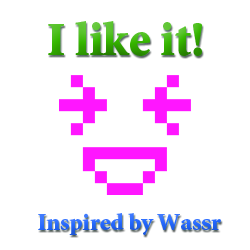
<style>
.page{position:relative;width:250px;height:250px;background:#ffffff}
.page>*{position:absolute;margin:0}
.t1{font:48px "MinionStd-Black"}
.t2{font:24px "MinionStd-Black";color:#2367ff}
</style>
<div class="page">
<p class="t1" style="left:48px;top:21px;width:154px;height:35px">I like it!</p>
<p class="t2" style="left:38px;top:213px;width:183px;height:22px">Inspired by Wassr</p>
</div>
